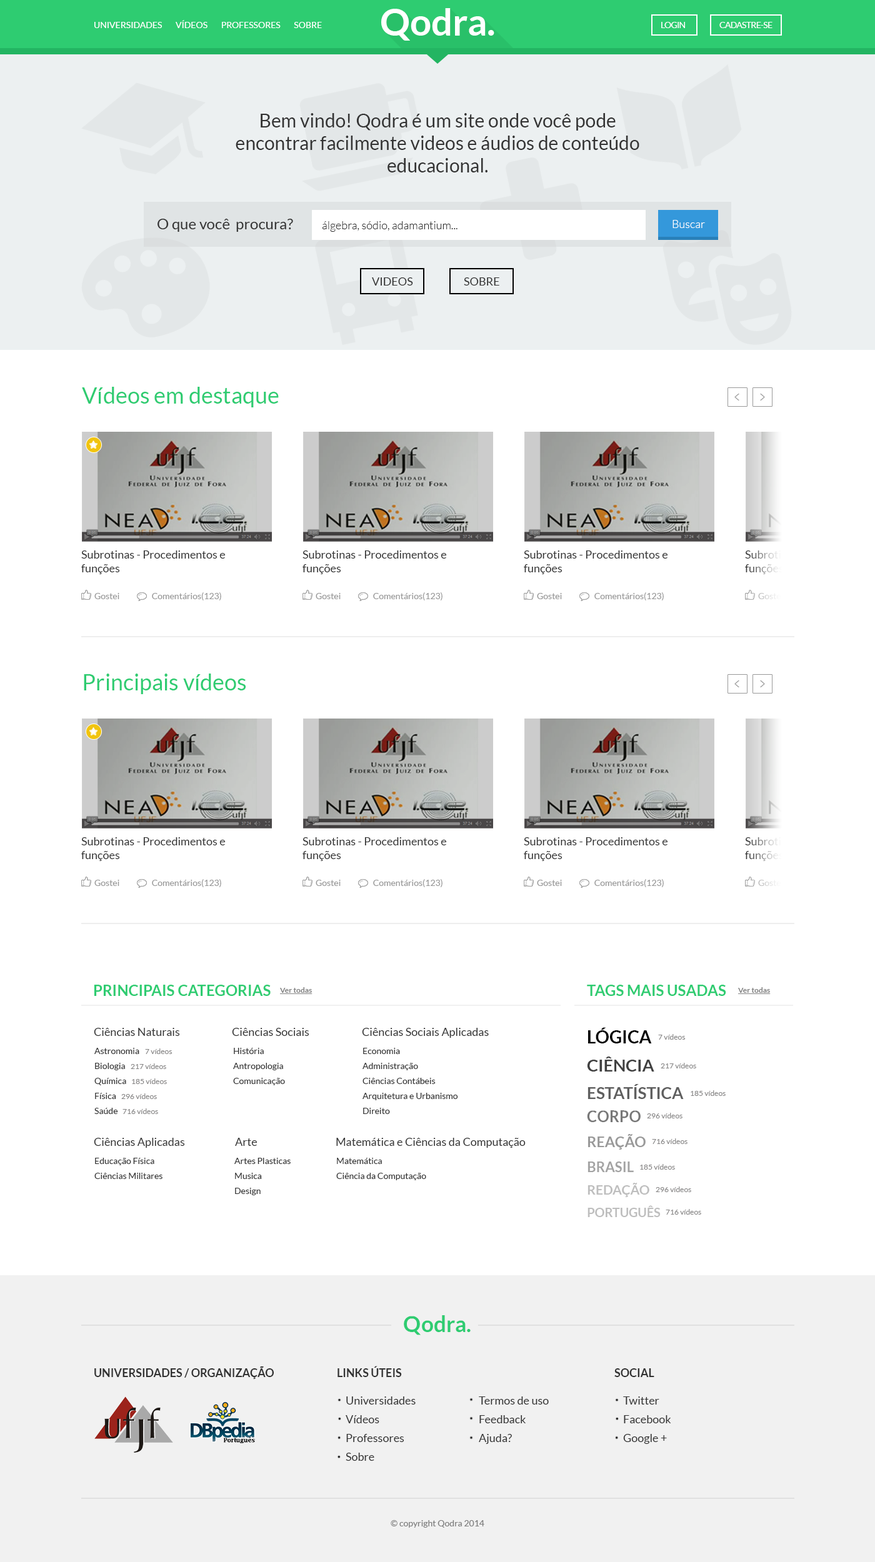
<style>
.page{position:relative;width:875px;height:1562px;background:#ffffff}
.page>*{position:absolute;margin:0}
.t1{font:37.2px "Lato-Bold";color:#ffffff}
.t2{font:8.7px "Lato-Regular";color:#ffffff}
.t3{font:8.7px "Lato-Regular";letter-spacing:-0.05em;color:#ffffff}
.t4{font:18.7px "Lato-Regular";color:#333333}
.t5{font:15px "Lato-Regular";color:#333333}
.t6{font:11.2px "Lato-Light";color:#333333}
.t7{font:11.2px "Lato-Light";color:#ffffff}
.t8{font:11.2px "Lato-Regular";color:#333333}
.t9{font:22.5px "Lato-Regular";color:#2ecc71}
.t10{font:8.7px "Lato-Regular";color:#999999}
.t11{font:8.7px "Lato-Regular"}
.t12{font:15px "Lato-Bold";color:#2ecc71;text-transform:uppercase}
.t13{font:7.5px "Lato-Bold";color:#818181;text-decoration:underline}
.t14{font:17.5px "Lato-Bold";color:#000000;text-transform:uppercase}
.t15{font:7.5px "Lato-Regular";color:#878686}
.t16{font:8.7px/15px "Lato-Regular";color:#333333}
.t17{font:16.8px "Lato-Bold";color:#404040;text-transform:uppercase}
.t18{font:16.1px "Lato-Bold";color:#5f5f5f;text-transform:uppercase}
.t19{font:15.3px "Lato-Bold";color:#797979;text-transform:uppercase}
.t20{font:14.6px "Lato-Bold";color:#9a9a9a;text-transform:uppercase}
.t21{font:13.9px "Lato-Bold";color:#a4a4a4;text-transform:uppercase}
.t22{font:13.1px "Lato-Bold";color:#bebebe;text-transform:uppercase}
.t23{font:12.4px "Lato-Bold";color:#bebebe;text-transform:uppercase}
.t24{font:22.8px "Lato-Bold";color:#2ecc71}
.t25{font:11.2px "Lato-Bold";color:#333333;text-transform:uppercase}
.t26{font:11.2px/18.7px "Lato-Regular";color:#333333}
.t27{font:9px "Lato-Regular";color:#7d7d7d}
</style>
<div class="page">
<p class="t1" style="left:381px;top:8px;width:113px;height:33px">Qodra.</p>
<p class="t2" style="left:94px;top:20px;width:228px;height:8px">UNIVERSIDADES        VÍDEOS        PROFESSORES        SOBRE</p>
<p class="t3" style="left:661px;top:22px;width:24px;height:6px">LOGIN</p>
<p class="t3" style="left:719px;top:22px;width:53px;height:6px">CADASTRE-SE</p>
<p class="t4" style="left:236px;top:113px;width:403px;height:59px;text-align:center">Bem vindo! Qodra é um site onde você pode encontrar facilmente videos e áudios de conteúdo educacional.<br><br>Quer aprender alguma coisa? Busque agora e encontre o conteúdo que você está procurando.</p>
<p class="t5" style="left:157px;top:219px;width:136px;height:13px">O que você  procura?</p>
<p class="t6" style="left:322px;top:221px;width:135px;height:11px">álgebra, sódio, adamantium...</p>
<p class="t7" style="left:672px;top:220px;width:33px;height:8px">Buscar</p>
<p class="t8" style="left:372px;top:277px;width:41px;height:9px">VIDEOS</p>
<p class="t8" style="left:464px;top:277px;width:35px;height:9px">SOBRE</p>
<p class="t9" style="left:82px;top:387px;width:197px;height:20px">Vídeos em destaque</p>
<p class="t8" style="left:81px;top:550px;width:145px;height:24px">Subrotinas - Procedimentos e funções</p>
<p class="t8" style="left:302px;top:550px;width:145px;height:24px">Subrotinas - Procedimentos e funções</p>
<p class="t8" style="left:524px;top:550px;width:144px;height:24px">Subrotinas - Procedimentos e funções</p>
<p class="t10" style="left:94px;top:593px;width:25px;height:6px">Gostei</p>
<p class="t10" style="left:152px;top:592px;width:69px;height:8px">Comentários(123)</p>
<p class="t10" style="left:315px;top:593px;width:25px;height:6px">Gostei</p>
<p class="t10" style="left:373px;top:592px;width:69px;height:8px">Comentários(123)</p>
<p class="t10" style="left:537px;top:593px;width:25px;height:6px">Gostei</p>
<p class="t10" style="left:594px;top:592px;width:69px;height:8px">Comentários(123)</p>
<p class="t11" style="left:758px;top:593px;width:25px;height:6px">Gostei</p>
<p class="t9" style="left:84px;top:673px;width:162px;height:21px">Principais vídeos</p>
<p class="t8" style="left:81px;top:837px;width:145px;height:24px">Subrotinas - Procedimentos e funções</p>
<p class="t8" style="left:302px;top:837px;width:145px;height:24px">Subrotinas - Procedimentos e funções</p>
<p class="t8" style="left:524px;top:837px;width:144px;height:24px">Subrotinas - Procedimentos e funções</p>
<p class="t10" style="left:94px;top:880px;width:25px;height:6px">Gostei</p>
<p class="t10" style="left:152px;top:879px;width:69px;height:8px">Comentários(123)</p>
<p class="t10" style="left:315px;top:880px;width:25px;height:6px">Gostei</p>
<p class="t10" style="left:373px;top:879px;width:69px;height:8px">Comentários(123)</p>
<p class="t10" style="left:537px;top:880px;width:25px;height:6px">Gostei</p>
<p class="t10" style="left:594px;top:879px;width:69px;height:8px">Comentários(123)</p>
<p class="t11" style="left:758px;top:880px;width:25px;height:6px">Gostei</p>
<p class="t12" style="left:94px;top:985px;width:177px;height:11px">Principais categorias</p>
<p class="t13" style="left:280px;top:987px;width:32px;height:7px">Ver todas</p>
<p class="t12" style="left:587px;top:985px;width:139px;height:11px">Tags mais usadas</p>
<p class="t13" style="left:738px;top:987px;width:32px;height:7px">Ver todas</p>
<p class="t8" style="left:94px;top:1028px;width:86px;height:8px">Ciências Naturais</p>
<p class="t8" style="left:232px;top:1028px;width:77px;height:8px">Ciências Sociais</p>
<p class="t8" style="left:362px;top:1028px;width:127px;height:10px">Ciências Sociais Aplicadas</p>
<p class="t14" style="left:588px;top:1027px;width:64px;height:16px">Lógica</p>
<p class="t15" style="left:658px;top:1034px;width:27px;height:6px">7 vídeos</p>
<p class="t16" style="left:94px;top:1048px;width:45px;height:66px">Astronomia<br>Biologia<br>Química<br>Física<br>Saúde</p>
<p class="t15" style="left:145px;top:1048px;width:27px;height:6px">7 vídeos</p>
<p class="t16" style="left:233px;top:1048px;width:52px;height:37px">História<br>Antropologia<br>Comunicação</p>
<p class="t16" style="left:362px;top:1048px;width:96px;height:66px">Economia<br>Administração<br>Ciências Contábeis<br>Arquitetura e Urbanismo<br>Direito</p>
<p class="t17" style="left:587px;top:1056px;width:67px;height:15px">Ciência</p>
<p class="t15" style="left:131px;top:1063px;width:35px;height:6px">217 vídeos</p>
<p class="t15" style="left:660px;top:1063px;width:36px;height:5px">217 vídeos</p>
<p class="t15" style="left:132px;top:1078px;width:35px;height:6px">185 vídeos</p>
<p class="t18" style="left:587px;top:1084px;width:96px;height:15px">Estatística</p>
<p class="t15" style="left:121px;top:1093px;width:36px;height:6px">296 vídeos</p>
<p class="t15" style="left:690px;top:1090px;width:35px;height:6px">185 vídeos</p>
<p class="t15" style="left:122px;top:1108px;width:36px;height:6px">716 vídeos</p>
<p class="t19" style="left:587px;top:1110px;width:53px;height:12px">CORPO</p>
<p class="t15" style="left:647px;top:1113px;width:35px;height:5px">296 vídeos</p>
<p class="t20" style="left:588px;top:1134px;width:57px;height:16px">Reação</p>
<p class="t8" style="left:94px;top:1138px;width:91px;height:10px">Ciências Aplicadas</p>
<p class="t8" style="left:235px;top:1138px;width:22px;height:8px">Arte</p>
<p class="t8" style="left:336px;top:1138px;width:189px;height:10px">Matemática e Ciências da Computação</p>
<p class="t15" style="left:652px;top:1138px;width:35px;height:6px">716 vídeos</p>
<p class="t16" style="left:94px;top:1158px;width:68px;height:21px">Educação Física<br>Ciências Militares</p>
<p class="t16" style="left:234px;top:1158px;width:57px;height:37px">Artes Plasticas<br>Musica<br>Design</p>
<p class="t16" style="left:336px;top:1158px;width:90px;height:22px">Matemática<br>Ciência da Computação</p>
<p class="t21" style="left:587px;top:1161px;width:46px;height:11px">Brasil</p>
<p class="t15" style="left:640px;top:1164px;width:35px;height:6px">185 vídeos</p>
<p class="t22" style="left:587px;top:1183px;width:62px;height:14px">Redação</p>
<p class="t15" style="left:655px;top:1186px;width:36px;height:6px">296 vídeos</p>
<p class="t23" style="left:587px;top:1205px;width:73px;height:12px">Português</p>
<p class="t15" style="left:665px;top:1209px;width:36px;height:6px">716 vídeos</p>
<p class="t24" style="left:404px;top:1315px;width:66px;height:20px">Qodra.</p>
<p class="t25" style="left:94px;top:1366px;width:180px;height:13px">Universidades / Organização</p>
<p class="t25" style="left:337px;top:1366px;width:65px;height:11px">Links úteis</p>
<p class="t25" style="left:614px;top:1368px;width:40px;height:9px">Social</p>
<p class="t26" style="left:345px;top:1396px;width:70px;height:65px">Universidades<br>Vídeos<br>Professores<br>Sobre</p>
<p class="t26" style="left:479px;top:1396px;width:70px;height:48px">Termos de uso<br>Feedback<br>Ajuda?</p>
<p class="t26" style="left:623px;top:1396px;width:48px;height:48px">Twitter<br>Facebook<br>Google +</p>
<p class="t27" style="left:390px;top:1520px;width:94px;height:8px">© copyright Qodra 2014</p>
</div>
